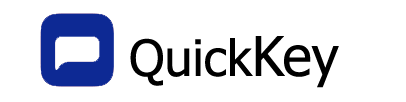
<style>
.page{position:relative;width:406px;height:102px;background:#ffffff}
.page>*{position:absolute;margin:0}
.t1{font:50px "Tahoma";color:#000000}
.t2{font:55px "Tahoma";color:#000000}
</style>
<div class="page">
<p class="t1" style="left:130px;top:36px;width:209px;height:52px">Quick<span class="t2">Key</span></p>
</div>
